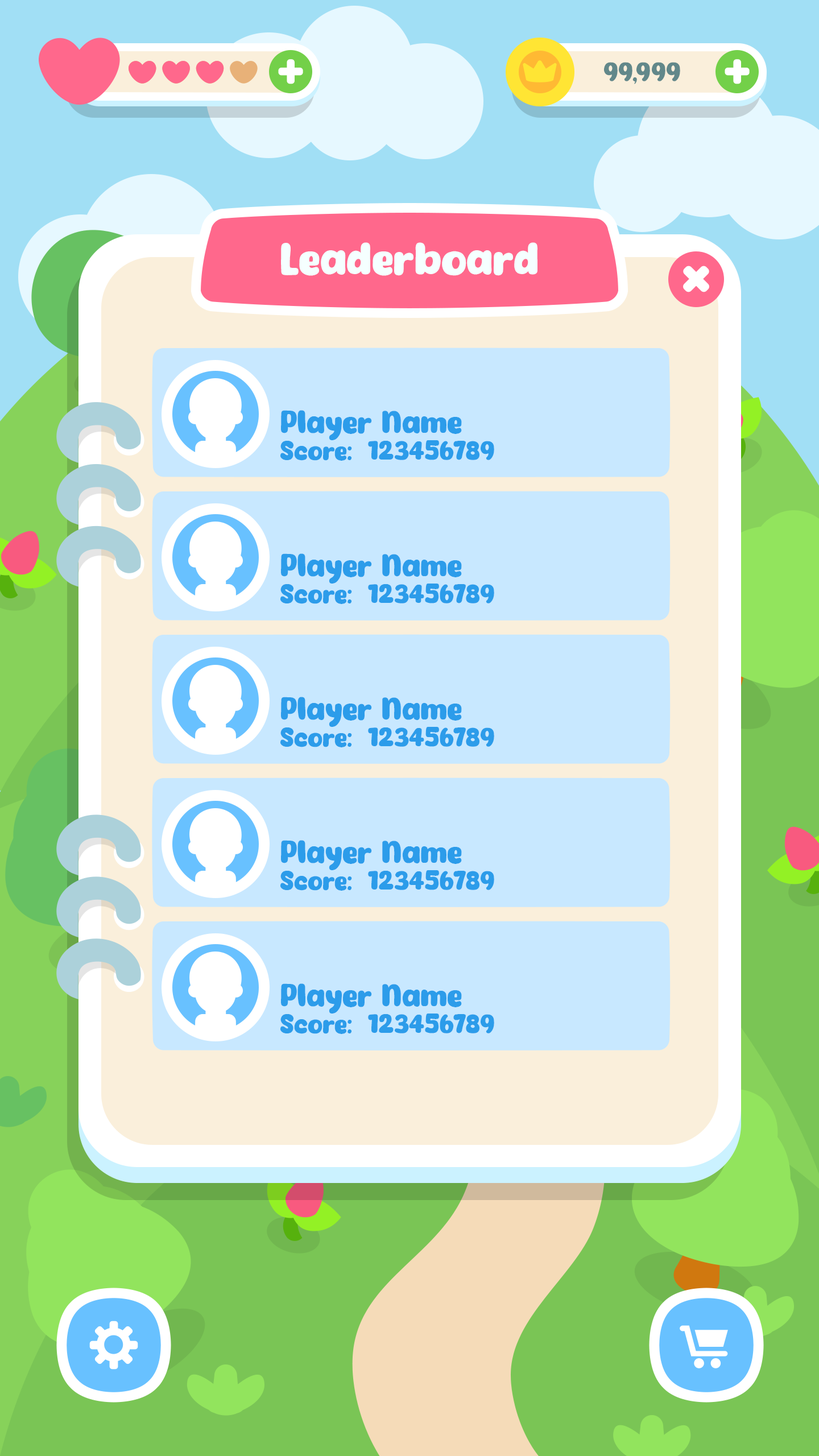
<style>
.page{position:relative;width:819px;height:1456px}
.page>*{position:absolute;margin:0}
.t1{font:43.8px "Eazy-Chat";color:#f5ffff}
.t2{font:30.7px "Eazy-Chat";color:#2c9cea}
.t3{font:25.6px "Eazy-Chat";color:#2c9cea}
</style>
<div class="page">
<p class="t1" style="left:281px;top:242px;width:256px;height:34px">Leaderboard</p>
<p class="t2" style="left:281px;top:410px;width:181px;height:30px">Player Name</p>
<p class="t3" style="left:280px;top:440px;width:214px;height:21px">Score:  123456789</p>
<p class="t2" style="left:281px;top:553px;width:181px;height:31px">Player Name</p>
<p class="t3" style="left:280px;top:584px;width:214px;height:20px">Score:  123456789</p>
<p class="t2" style="left:281px;top:697px;width:181px;height:30px">Player Name</p>
<p class="t3" style="left:280px;top:727px;width:214px;height:20px">Score:  123456789</p>
<p class="t2" style="left:281px;top:840px;width:181px;height:30px">Player Name</p>
<p class="t3" style="left:280px;top:870px;width:214px;height:21px">Score:  123456789</p>
<p class="t2" style="left:281px;top:983px;width:181px;height:30px">Player Name</p>
<p class="t3" style="left:280px;top:1013px;width:214px;height:21px">Score:  123456789</p>
</div>
